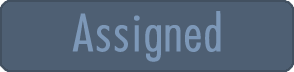
<style>
.page{position:relative;width:294px;height:72px;background:#4e5f73}
.page>*{position:absolute;margin:0}
.t1{font:47.2px "FuturaCondMedium";letter-spacing:-0.025em;color:#7d98b8;font-weight:bold;scale:1.09 1}
.t2{font:47.2px "FuturaCondMedium";letter-spacing:-0.025em;font-weight:bold;scale:1.09 1}
</style>
<div class="page">
<p class="t1" style="left:72px;top:11px;width:149px;height:51px">Assigned</p>
<p class="t2" style="left:92px;top:14px;width:109px;height:49px">Assign</p>
</div>
